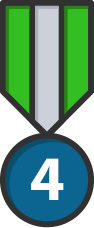
<style>
.page{position:relative;width:94px;height:228px}
.page>*{position:absolute;margin:0}
.t1{font:63.3px "MyriadPro-Bold";color:#ffffff}
</style>
<div class="page">
<p class="t1" style="left:31px;top:158px;width:33px;height:42px">4</p>
</div>
